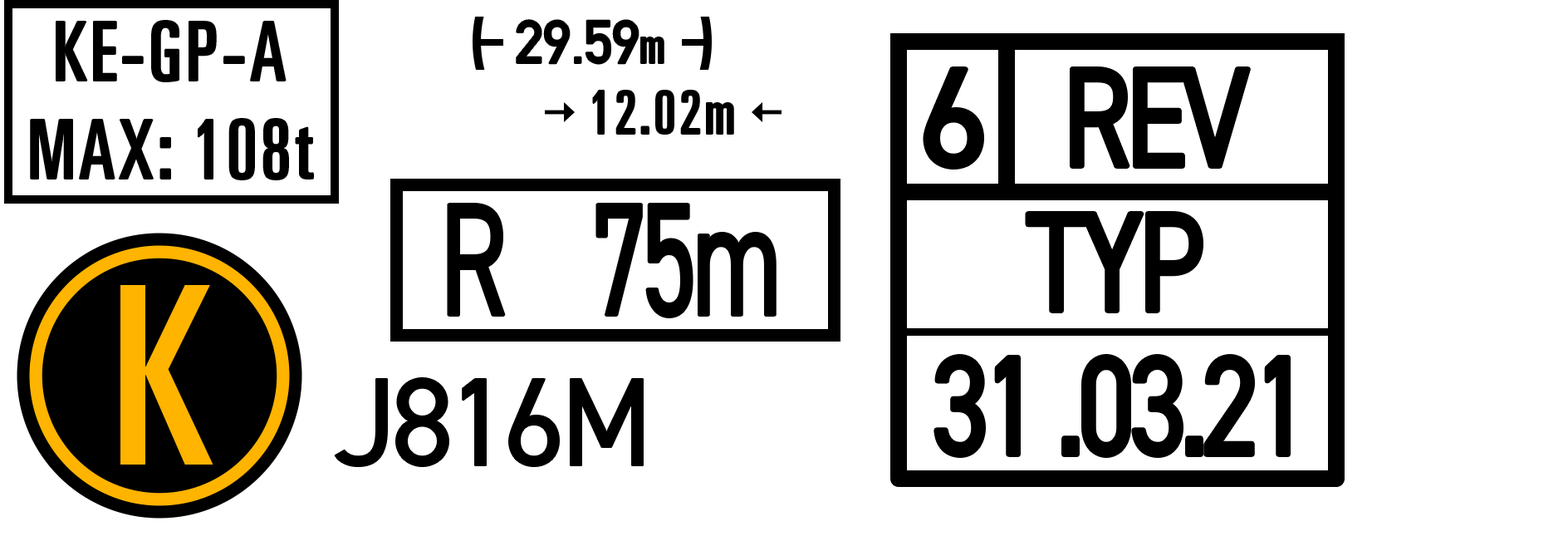
<style>
.page{position:relative;width:1568px;height:541px;background:#ffffff}
.page>*{position:absolute;margin:0}
.t1{font:81.6px "Univers-UltraCondensed";letter-spacing:0.05em;color:#000000}
.t2{font:59.8px "DIN-1451-Mittelschrift-Regular";letter-spacing:-0.02em;color:#000000}
.t3{font:51.5px "Univers-UltraCondensed";letter-spacing:-0.02em;color:#000000}
.t4{font:141.2px "DIN2014-Regular";letter-spacing:-0.05em;color:#000000}
.t5{font:141.2px "DIN2014-Regular";letter-spacing:-0.05em;color:#000000;scale:0.81 1}
.t6{font:59.8px "Univers-UltraCondensed";letter-spacing:0.05em;color:#000000}
.t7{font:160.3px "DIN2014-Regular";letter-spacing:-0.05em;color:#000000;scale:0.7 1}
.t8{font:248.3px "Univers-UltraCondensed";letter-spacing:0.05em;color:#ffb400}
.t9{font:124.6px "DIN2014-Regular";letter-spacing:-0.05em;color:#000000}
</style>
<div class="page">
<p class="t1" style="left:31px;top:21px;width:282px;height:158px;text-align:center">KE-GP-A<br>MAX: 108t</p>
<p class="t2" style="left:517px;top:20px;width:147px;height:44px">29.59<span class="t3">m</span></p>
<p class="t4" style="left:925px;top:69px;width:57px;height:98px">6</p>
<p class="t5" style="left:1072px;top:69px;width:176px;height:97px">REV</p>
<p class="t6" style="left:593px;top:91px;width:140px;height:43px">12.02m</p>
<p class="t7" style="left:448px;top:204px;width:327px;height:112px">R    75m</p>
<p class="t5" style="left:1027px;top:213px;width:174px;height:98px">TYP</p>
<p class="t8" style="left:120px;top:285px;width:93px;height:179px">K</p>
<p class="t5" style="left:936px;top:356px;width:352px;height:99px">31 .03.21</p>
<p class="t9" style="left:335px;top:377px;width:308px;height:89px">J816M</p>
</div>
